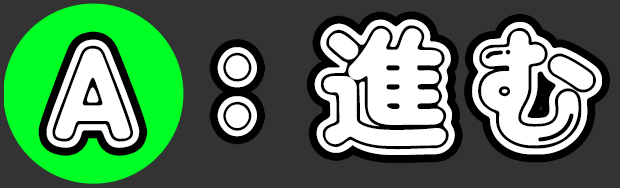
<style>
.page{position:relative;width:620px;height:188px;background:#333333}
.page>*{position:absolute;margin:0}
.t1{font:150px "DokiDokiFantasia";color:#ffffff}
</style>
<div class="page">
<p class="t1" style="left:217px;top:19px;width:385px;height:136px">：進む</p>
</div>
